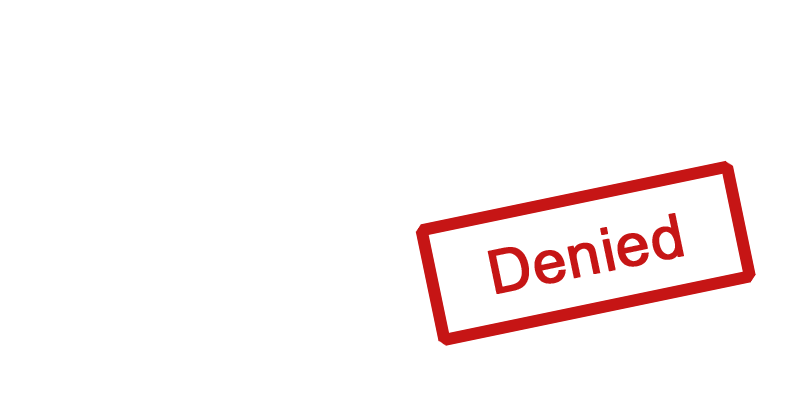
<style>
.page{position:relative;width:800px;height:400px;background:#ffffff}
.page>*{position:absolute;margin:0}
.t1{font:60px "ArialMT";color:#c61515;font-weight:bold}
</style>
<div class="page">
<p class="t1" style="left:487px;top:213px;width:197px;height:81px;rotate:-12deg">Denied</p>
</div>
